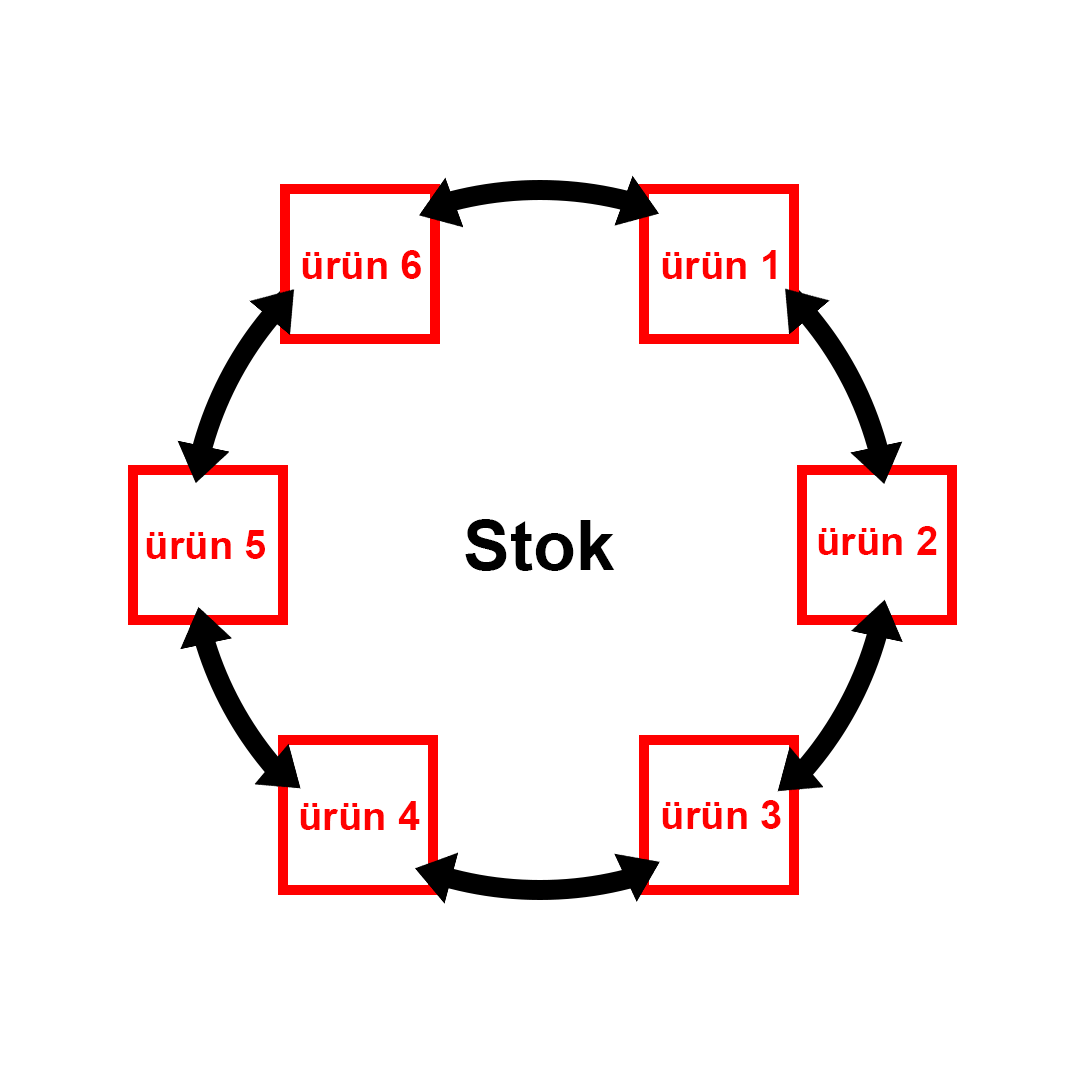
<style>
.page{position:relative;width:1080px;height:1080px;background:#ffffff}
.page>*{position:absolute;margin:0}
.t1{font:40px "Arial-BoldMT";color:#ff0000}
.t2{font:70px "Arial-BoldMT";color:#000000}
</style>
<div class="page">
<p class="t1" style="left:302px;top:250px;width:119px;height:29px">ürün 6</p>
<p class="t1" style="left:662px;top:250px;width:114px;height:29px">ürün 1</p>
<p class="t2" style="left:465px;top:519px;width:150px;height:52px">Stok</p>
<p class="t1" style="left:146px;top:530px;width:119px;height:29px">ürün 5</p>
<p class="t1" style="left:818px;top:526px;width:119px;height:29px">ürün 2</p>
<p class="t1" style="left:300px;top:801px;width:120px;height:29px">ürün 4</p>
<p class="t1" style="left:662px;top:800px;width:119px;height:29px">ürün 3</p>
</div>
